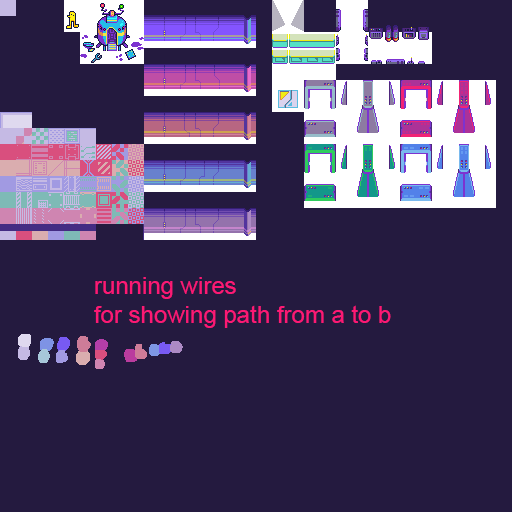
<style>
.page{position:relative;width:512px;height:512px;background:#241a3f}
.page>*{position:absolute;margin:0}
.t1{font:24px "ArialMT";color:#fc1974}
</style>
<div class="page">
<p class="t1" style="left:94px;top:277px;width:297px;height:51px;text-align:justify">running wires<br>for showing path from a to b</p>
</div>
